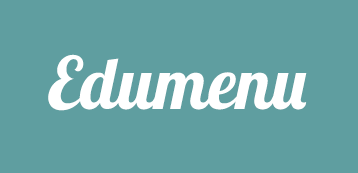
<style>
.page{position:relative;width:358px;height:173px;background:#5f9ea0}
.page>*{position:absolute;margin:0}
.t1{font:72px "Lobster-Regular";color:#ffffff}
</style>
<div class="page">
<p class="t1" style="left:48px;top:54px;width:259px;height:57px">Edumenu</p>
</div>
